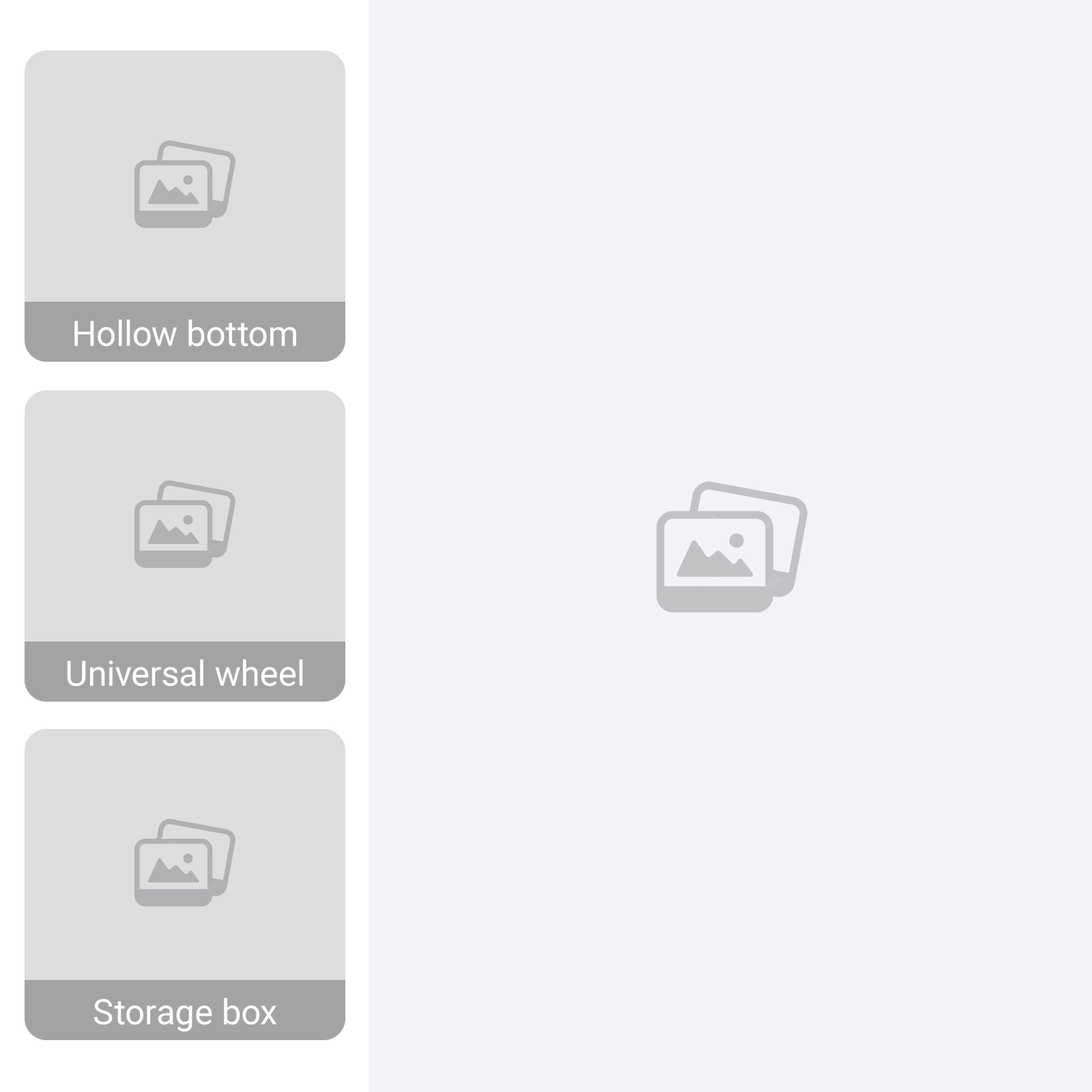
<style>
.page{position:relative;width:1092px;height:1092px;background:#f2f3f6}
.page>*{position:absolute;margin:0}
.t1{font:34.9px "Roboto-Regular";color:#ffffff}
</style>
<div class="page">
<p class="t1" style="left:74px;top:319px;width:222px;height:28px">Hollow bottom</p>
<p class="t1" style="left:67px;top:659px;width:236px;height:28px">Universal wheel</p>
<p class="t1" style="left:94px;top:998px;width:183px;height:34px">Storage box</p>
</div>
